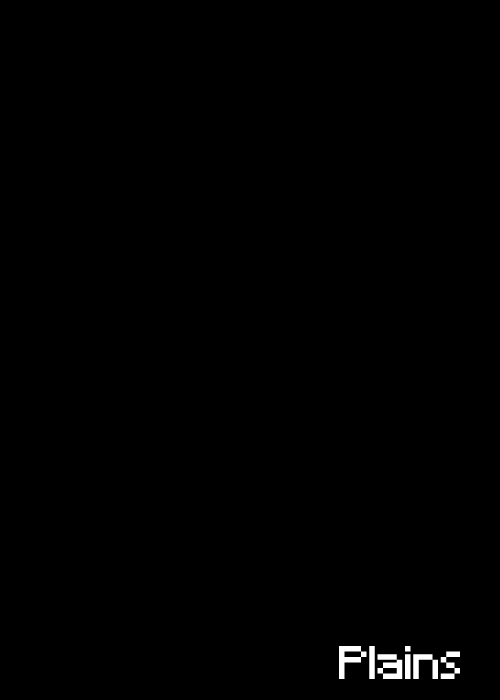
<style>
.page{position:relative;width:500px;height:700px;background:#000000}
.page>*{position:absolute;margin:0}
.t1{font:44px "Minecraft";color:#ffffff}
</style>
<div class="page">
<p class="t1" style="left:339px;top:646px;width:121px;height:33px">Plains</p>
</div>
